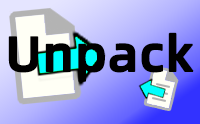
<style>
.page{position:relative;width:200px;height:124px}
.page>*{position:absolute;margin:0}
.t1{font:49.4px "AlibabaPuHuiTiM";color:#010000;font-weight:bold}
</style>
<div class="page">
<p class="t1" style="left:8px;top:32px;width:186px;height:50px">Unpack</p>
</div>
